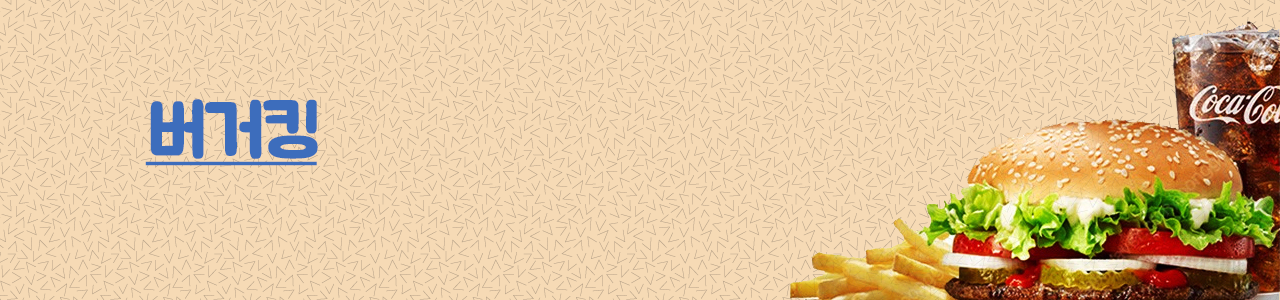
<style>
.page{position:relative;width:1280px;height:300px;background:#f6dab5}
.page>*{position:absolute;margin:0}
.t1{font:72px "BMJUA";letter-spacing:-0.05em;color:#3d6dbc;font-weight:bold;text-decoration:underline}
</style>
<div class="page">
<p class="t1" style="left:145px;top:99px;width:173px;height:67px">버거킹</p>
</div>
